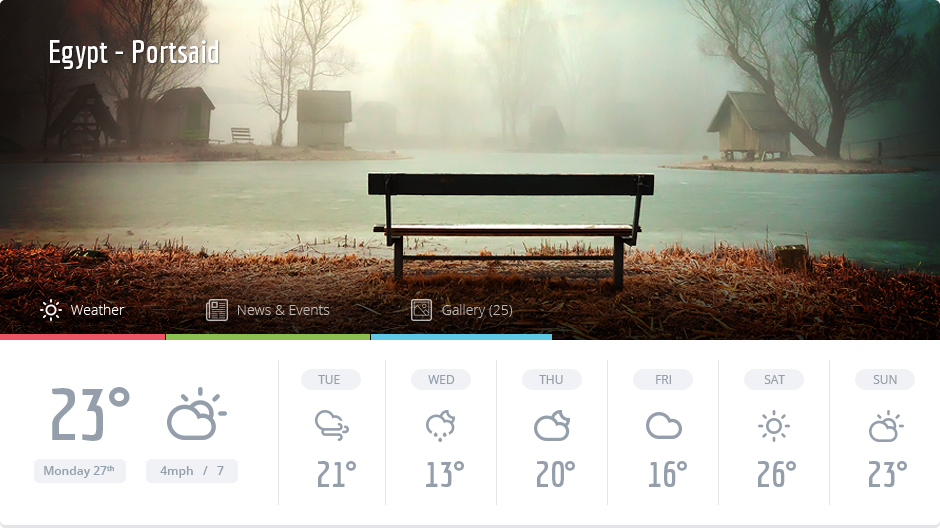
<style>
.page{position:relative;width:940px;height:528px;background:#ffffff}
.page>*{position:absolute;margin:0}
.t1{font:32px "Economica-Bold";color:#ffffff}
.t2{font:14px "OpenSans-Light";color:#ffffff}
.t3{font:14px "OpenSans-Light";color:#c0bab8}
.t4{font:14px "OpenSans-Light";color:#bcb7b4}
.t5{font:12px "OpenSans";color:#949fab}
.t6{font:72px "Economica-Bold";color:#949fab}
.t7{font:35.6px "Economica-Bold";color:#949fab}
.t8{font:12px "OpenSans-Semibold";color:#949fab}
</style>
<div class="page">
<p class="t1" style="left:50px;top:40px;width:168px;height:29px">Egypt - Portsaid</p>
<p class="t2" style="left:71px;top:304px;width:54px;height:11px">Weather</p>
<p class="t3" style="left:238px;top:305px;width:92px;height:10px">News &amp; Events</p>
<p class="t4" style="left:442px;top:304px;width:71px;height:14px">Gallery (25)</p>
<p class="t5" style="left:318px;top:375px;width:22px;height:9px">TUE</p>
<p class="t5" style="left:428px;top:375px;width:27px;height:9px">WED</p>
<p class="t5" style="left:539px;top:375px;width:24px;height:9px">THU</p>
<p class="t5" style="left:656px;top:375px;width:15px;height:9px">FRI</p>
<p class="t5" style="left:764px;top:375px;width:21px;height:9px">SAT</p>
<p class="t5" style="left:873px;top:375px;width:24px;height:9px">SUN</p>
<p class="t6" style="left:52px;top:387px;width:78px;height:54px">23°</p>
<p class="t7" style="left:318px;top:461px;width:38px;height:26px">21°</p>
<p class="t7" style="left:426px;top:461px;width:38px;height:26px">13°</p>
<p class="t7" style="left:537px;top:461px;width:38px;height:26px">20°</p>
<p class="t7" style="left:649px;top:461px;width:38px;height:26px">16°</p>
<p class="t7" style="left:758px;top:461px;width:38px;height:26px">26°</p>
<p class="t7" style="left:869px;top:461px;width:38px;height:26px">23°</p>
<p class="t8" style="left:44px;top:465px;width:70px;height:13px">Monday 27th</p>
<p class="t8" style="left:160px;top:466px;width:64px;height:12px">4mph   /   7</p>
</div>
